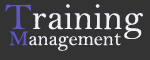
<style>
.page{position:relative;width:150px;height:60px;background:#333333}
.page>*{position:absolute;margin:0}
.t1{font:37.5px "BellMT";color:#f1f0fa}
.t2{font:37.5px "BellMT";color:#5e56ca}
.t3{font:20.8px "BellMT";color:#f1f0fa}
.t4{font:20.8px "BellMT";color:#5e56ca}
</style>
<div class="page">
<p class="t1" style="left:5px;top:4px;width:138px;height:35px"><span class="t2">T</span>raining</p>
<p class="t3" style="left:9px;top:31px;width:112px;height:20px"><span class="t4">M</span>anagement</p>
</div>
